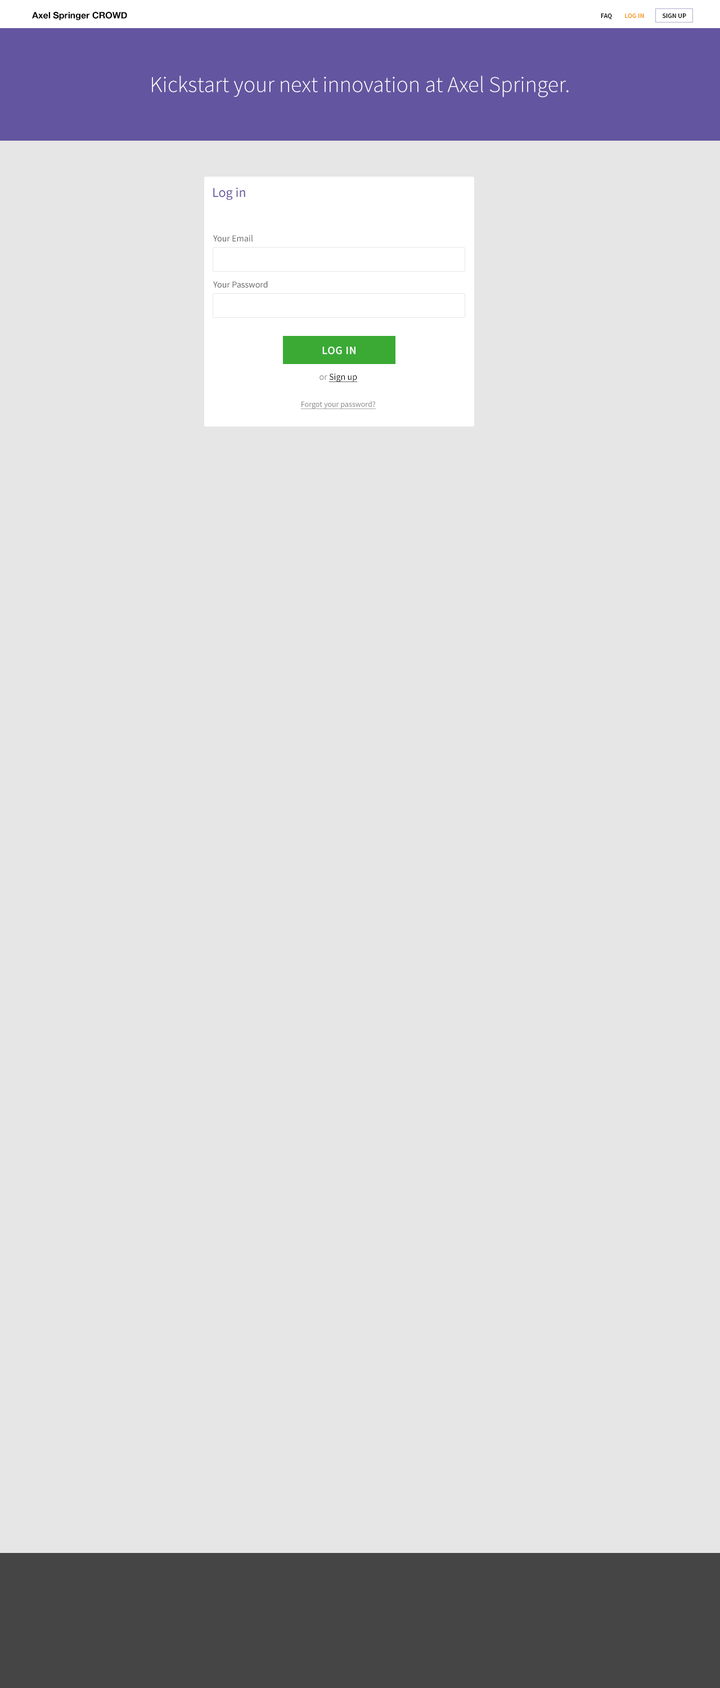
<style>
.page{position:relative;width:720px;height:1688px;background:#e6e6e6}
.page>*{position:absolute;margin:0}
.t1{font:9px "HelveticaNeue-Bold";color:#000000}
.t2{font:6.8px "SourceSansPro-Semibold";color:#000000;text-transform:uppercase}
.t3{font:6.8px "SourceSansPro-Semibold";color:#f39200;text-transform:uppercase}
.t4{font:22.5px "SourceSansPro-Light";color:#ffffff}
.t5{font:13.5px "SourceSansPro-Regular";color:#6455a0}
.t6{font:9px "SourceSansPro-Regular";color:#585858}
.t7{font:11.2px "SourceSansPro-Semibold";letter-spacing:0.032em;color:#ffffff;text-transform:uppercase}
.t8{font:7.9px/27px "SourceSansPro-Regular";color:#878787;text-decoration:underline}
.t9{font:9px/27px "SourceSansPro-Regular";color:#868686}
.t10{font:9px/27px "SourceSansPro-Regular";color:#000000;text-decoration:underline}
</style>
<div class="page">
<p class="t1" style="left:32px;top:12px;width:95px;height:8px">Axel Springer CROWD</p>
<p class="t2" style="left:601px;top:14px;width:85px;height:5px">FAQ         <span class="t3">Log IN</span>             Sign Up</p>
<p class="t4" style="left:152px;top:75px;width:417px;height:22px">Kickstart your next innovation at Axel Springer.</p>
<p class="t5" style="left:213px;top:187px;width:32px;height:13px">Log in</p>
<p class="t6" style="left:213px;top:235px;width:40px;height:7px">Your Email</p>
<p class="t6" style="left:213px;top:281px;width:55px;height:7px">Your Password</p>
<p class="t7" style="left:322px;top:346px;width:34px;height:8px">Log in</p>
<p class="t8" style="left:300px;top:374px;width:76px;height:35px;text-align:center"><span class="t9">or </span><span class="t10">Sign up<br></span>Forgot your password?</p>
</div>
